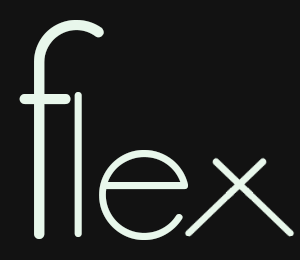
<style>
.page{position:relative;width:300px;height:260px;background:#121212}
.page>*{position:absolute;margin:0}
.t1{font:200px "Fox&Cat";color:#e8f7eb}
.t2{font:300px "Fox&Cat";color:#e8f7eb}
</style>
<div class="page">
<p class="t1" style="left:19px;top:20px;width:169px;height:220px"><span class="t2">f</span>le</p>
</div>
